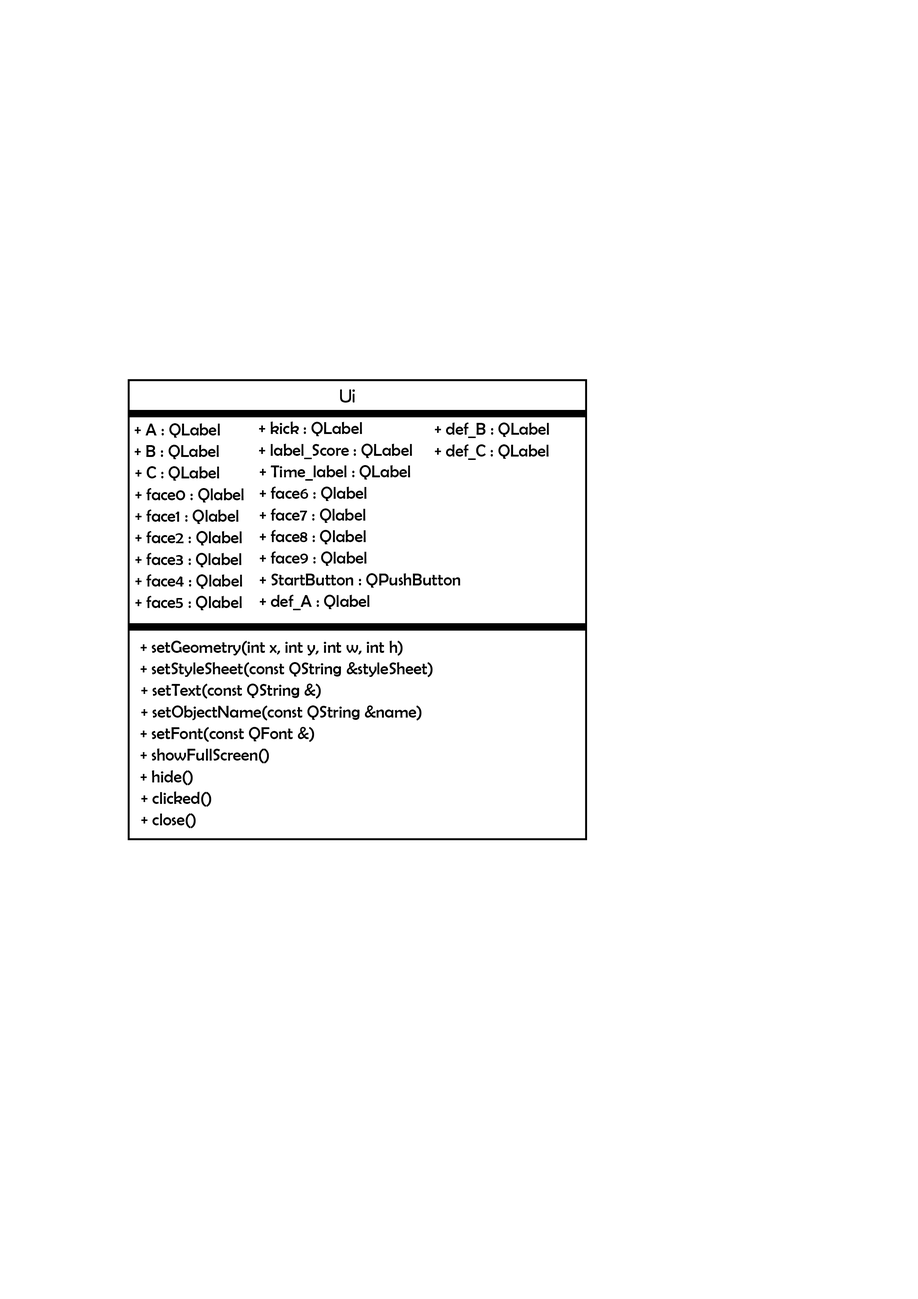
<style>
.page{position:relative;width:918px;height:1299px;background:#ffffff}
.page>*{position:absolute;margin:0}
.t1{font:17px "HanWangYenHeavy";color:#000000}
.t2{font:17px/21.6px "BerlinSansFB-Reg";color:#000000}
</style>
<div class="page">
<p class="t1" style="left:340px;top:389px;width:15px;height:14px">Ui</p>
<p class="t2" style="left:134px;top:423px;width:110px;height:187px">+ A : QLabel<br>    + B : QLabel<br>  + C : QLabel<br>  + face0 : Qlabel<br>  + face1 : Qlabel<br>  + face2 : Qlabel<br>  + face3 : Qlabel<br>  + face4 : Qlabel<br>  + face5 : Qlabel</p>
<p class="t2" style="left:259px;top:421px;width:202px;height:189px">+ kick : QLabel<br>    + label_Score : QLabel<br>  + Time_label : QLabel<br>  + face6 : Qlabel<br>  + face7 : Qlabel<br>  + face8 : Qlabel<br>  + face9 : Qlabel<br>  + StartButton : QPushButton<br>  + def_A : Qlabel</p>
<p class="t2" style="left:435px;top:422px;width:114px;height:38px">+ def_B : QLabel<br>    + def_C : QLabel</p>
<p class="t2" style="left:140px;top:640px;width:293px;height:188px">+ setGeometry(int x, int y, int w, int h)<br>    + setStyleSheet(const QString &amp;styleSheet)<br>  + setText(const QString &amp;)<br>  + setObjectName(const QString &amp;name)<br>    + setFont(const QFont &amp;)<br>    + showFullScreen()<br>    + hide()<br>  + clicked()<br>  + close()</p>
</div>
